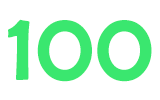
<style>
.page{position:relative;width:160px;height:100px;background:#ffffff}
.page>*{position:absolute;margin:0}
.t1{font:100px "BerlinSansFB-Reg";color:#3ae76f}
</style>
<div class="page">
<p class="t1" style="left:8px;top:19px;width:144px;height:63px">100</p>
</div>
